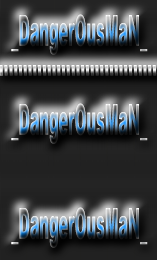
<style>
.page{position:relative;width:157px;height:260px}
.page>*{position:absolute;margin:0}
.t1{font:43.1px "Arial-Black";scale:0.33 1}
</style>
<div class="page">
<p class="t1" style="left:11px;top:14px;width:137px;height:41px">_DangerOusMaN_</p>
<p class="t1" style="left:11px;top:103px;width:137px;height:41px">_DangerOusMaN_</p>
<p class="t1" style="left:11px;top:207px;width:137px;height:41px">_DangerOusMaN_</p>
</div>
